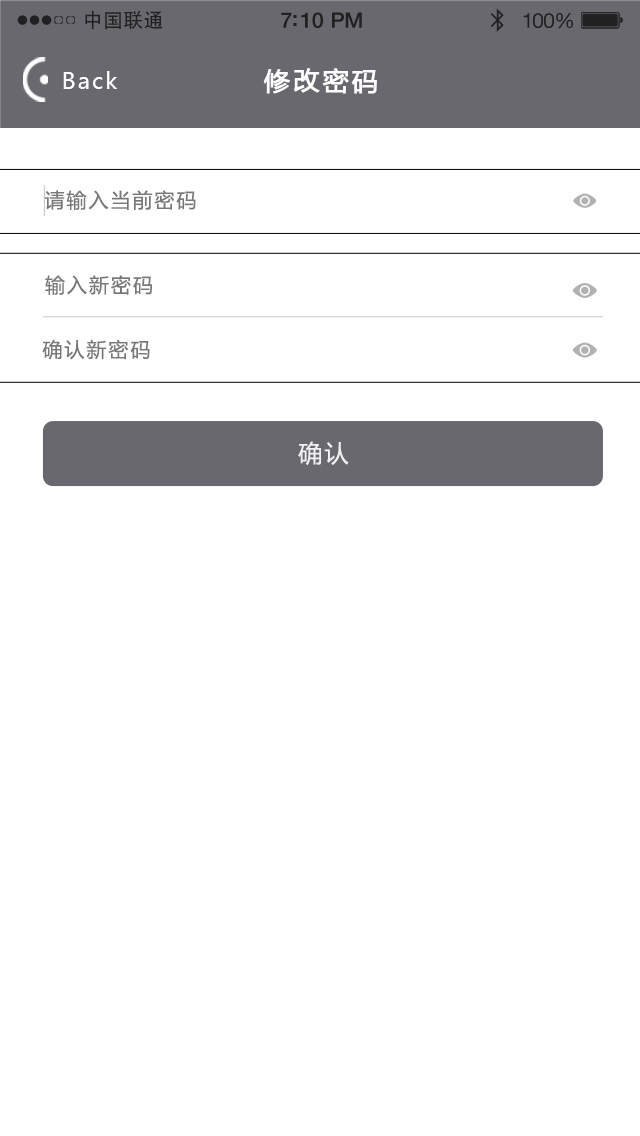
<style>
.page{position:relative;width:640px;height:1136px;background:#ffffff}
.page>*{position:absolute;margin:0}
.t1{font:19.7px "AdobeHeitiStd-Regular";letter-spacing:0.02em;color:#212121}
.t2{font:21.4px "HelveticaNeue-Medium";letter-spacing:-0.02em;color:#212121}
.t3{font:20.6px "HelveticaNeue";letter-spacing:-0.02em;color:#212121}
.t4{font:22px "MicrosoftYaHei";letter-spacing:0.1em;color:#ffffff}
.t5{font:26px "MicrosoftYaHei";letter-spacing:0.1em;color:#ffffff;font-weight:bold}
.t6{font:20px "MicrosoftYaHei";letter-spacing:0.1em;color:#787878}
.t7{font:24px "MicrosoftYaHei";letter-spacing:0.1em;color:#f0f0f0}
</style>
<div class="page">
<p class="t1" style="left:85px;top:10px;width:78px;height:20px">中国联通</p>
<p class="t2" style="left:281px;top:12px;width:81px;height:16px">7:10 PM</p>
<p class="t3" style="left:523px;top:13px;width:50px;height:16px">100%</p>
<p class="t4" style="left:63px;top:71px;width:55px;height:18px">Back</p>
<p class="t5" style="left:263px;top:68px;width:114px;height:26px">修改密码</p>
<p class="t6" style="left:44px;top:190px;width:152px;height:20px">请输入当前密码</p>
<p class="t6" style="left:45px;top:275px;width:107px;height:20px">输入新密码</p>
<p class="t6" style="left:42px;top:339px;width:108px;height:21px">确认新密码</p>
<p class="t7" style="left:298px;top:441px;width:51px;height:25px">确认</p>
</div>
